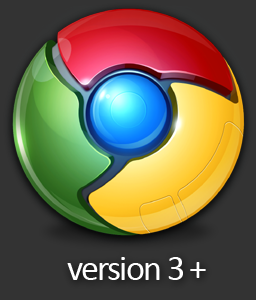
<style>
.page{position:relative;width:256px;height:300px;background:#333333}
.page>*{position:absolute;margin:0}
.t1{font:36px "Calibri";letter-spacing:-0.05em;color:#ffffff}
</style>
<div class="page">
<p class="t1" style="left:67px;top:257px;width:139px;height:23px">version 3 +</p>
</div>
